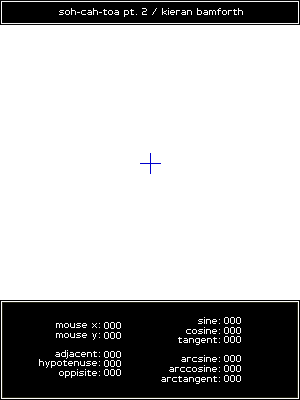
<style>
.page{position:relative;width:300px;height:400px;background:#ffffff}
.page>*{position:absolute;margin:0}
.t1{font:8px "PFTempestaSeven";color:#ffffff}
</style>
<div class="page">
<p class="t1" style="left:59px;top:8px;width:184px;height:9px">soh-cah-toa pt. 2 / kieran bamforth</p>
<p class="t1" style="left:161px;top:317px;width:59px;height:67px;text-align:right">sine:<br>cosine:<br>tangent:<br><br>arcsine:<br>arccosine:<br>arctangent:</p>
<p class="t1" style="left:224px;top:317px;width:17px;height:7px">000</p>
<p class="t1" style="left:39px;top:323px;width:61px;height:55px;text-align:right">mouse x:<br>mouse y:<br><br>adjacent:<br>hypotenuse:<br>oppisite:</p>
<p class="t1" style="left:104px;top:322px;width:17px;height:7px">000</p>
<p class="t1" style="left:224px;top:327px;width:17px;height:7px">000</p>
<p class="t1" style="left:104px;top:332px;width:17px;height:7px">000</p>
<p class="t1" style="left:224px;top:336px;width:17px;height:7px">000</p>
<p class="t1" style="left:104px;top:351px;width:17px;height:7px">000</p>
<p class="t1" style="left:104px;top:360px;width:17px;height:7px">000</p>
<p class="t1" style="left:224px;top:365px;width:17px;height:7px">000</p>
<p class="t1" style="left:224px;top:355px;width:17px;height:7px">000</p>
<p class="t1" style="left:104px;top:369px;width:17px;height:7px">000</p>
<p class="t1" style="left:224px;top:375px;width:17px;height:7px">000</p>
</div>
